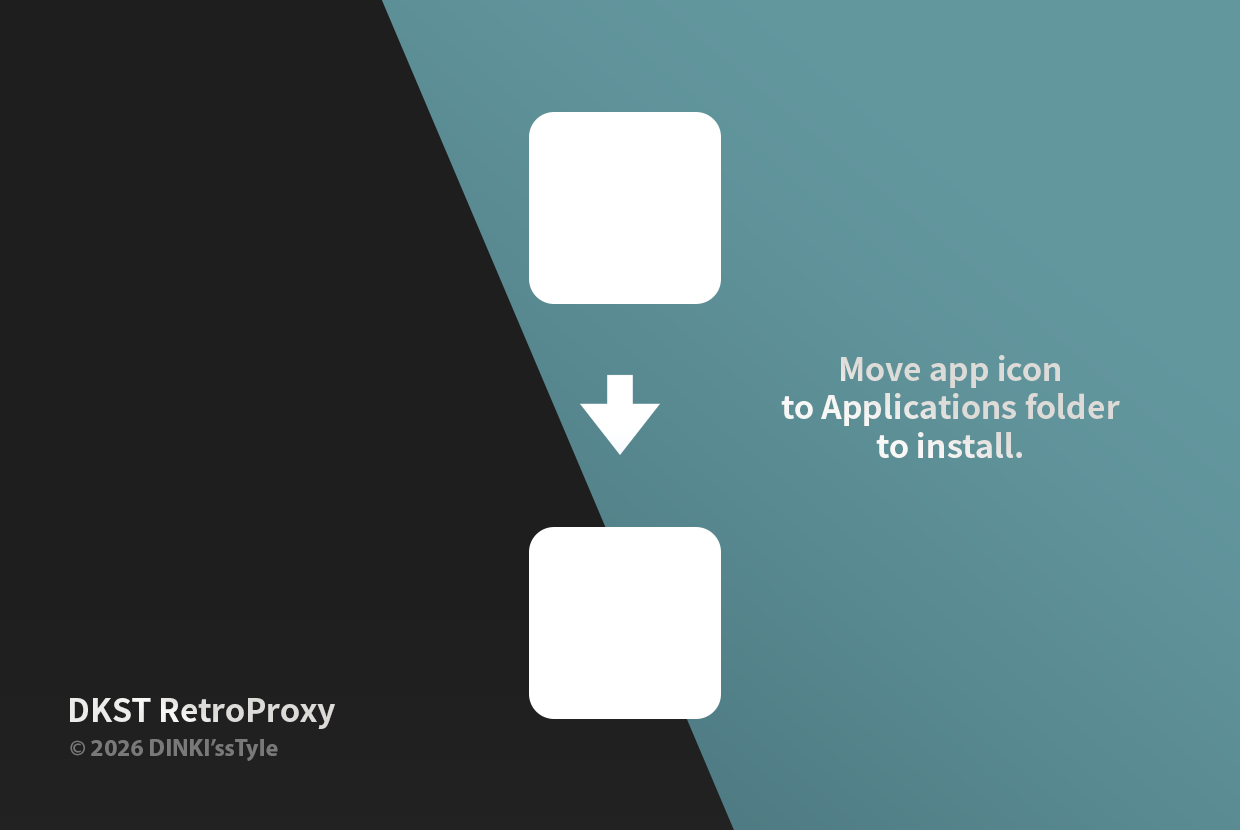
<style>
.page{position:relative;width:1240px;height:830px;background:#1e1e1e}
.page>*{position:absolute;margin:0}
.t1{font:32.1px "NotoSansCJKkr-Bold";color:#deddda}
.t2{font:32.1px "NotoSansCJKkr-Bold";color:#e6e5e3}
.t3{font:24px "MyriadPro-Bold";color:#797979}
</style>
<div class="page">
<p class="t1" style="left:781px;top:355px;width:339px;height:103px;text-align:center">Move app icon<br>to Applications folder<br>to install.</p>
<p class="t2" style="left:70px;top:698px;width:265px;height:31px">DKST RetroProxy</p>
<p class="t3" style="left:70px;top:739px;width:208px;height:22px">© 2026 DINKI’ssTyle</p>
</div>
